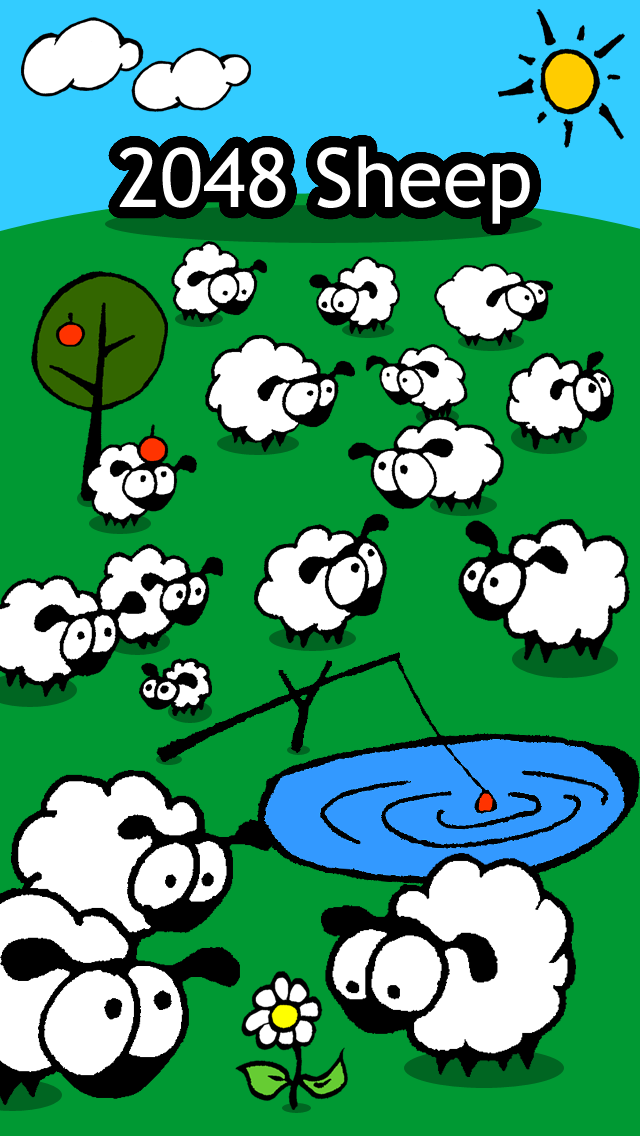
<style>
.page{position:relative;width:640px;height:1136px;background:#009933}
.page>*{position:absolute;margin:0}
.t1{font:82px "TrebuchetMS";color:#ffffff}
</style>
<div class="page">
<p class="t1" style="left:119px;top:146px;width:411px;height:78px">2048 Sheep</p>
</div>
